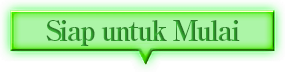
<style>
.page{position:relative;width:285px;height:72px}
.page>*{position:absolute;margin:0}
.t1{font:28px "RyuminPro-ExBold";letter-spacing:-0.08em}
</style>
<div class="page">
<p class="t1" style="left:46px;top:20px;width:194px;height:26px">Siap untuk Mulai</p>
</div>
